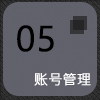
<style>
.page{position:relative;width:100px;height:100px;background:#60616b}
.page>*{position:absolute;margin:0}
.t1{font:36px "Ebrima";color:#000000;font-weight:bold}
.t2{font:14px "MicrosoftJhengHeiRegular";color:#ffffff;font-weight:bold}
</style>
<div class="page">
<p class="t1" style="left:17px;top:25px;width:37px;height:27px">05</p>
<p class="t2" style="left:34px;top:73px;width:57px;height:13px">账号管理</p>
</div>
